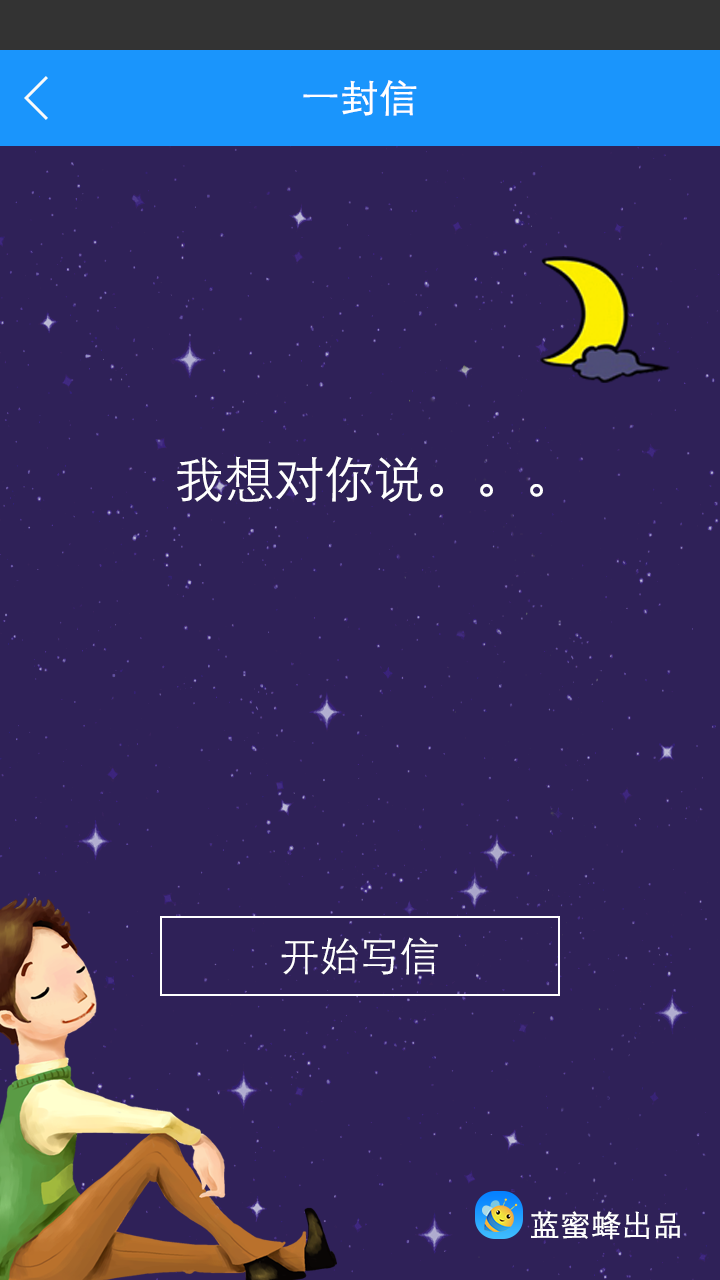
<style>
.page{position:relative;width:720px;height:1280px;background:#2f2158}
.page>*{position:absolute;margin:0}
.t1{font:38px "STXihei";color:#ffffff;font-weight:bold}
.t2{font:50px "STXihei";color:#ffffff}
.t3{font:40px "STXihei";color:#ffffff}
.t4{font:30px "STXihei";color:#ffffff;font-weight:bold}
</style>
<div class="page">
<p class="t1" style="left:303px;top:80px;width:114px;height:36px">一封信</p>
<p class="t2" style="left:177px;top:456px;width:366px;height:46px">我想对你说。。。</p>
<p class="t3" style="left:281px;top:937px;width:157px;height:38px">开始写信</p>
<p class="t4" style="left:531px;top:1211px;width:149px;height:29px">蓝蜜蜂出品</p>
</div>
